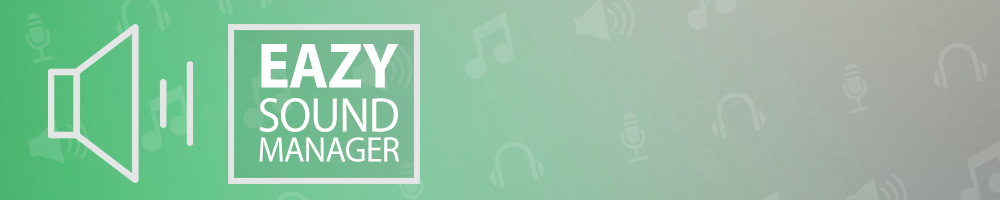
<style>
.page{position:relative;width:1000px;height:200px}
.page>*{position:absolute;margin:0}
.t1{font:64.5px "MyriadPro-Bold";letter-spacing:-0.02em;color:#ffffff;scale:0.94 1}
.t2{font:48.8px "MyriadPro-Regular";letter-spacing:-0.02em;color:#ffffff;scale:0.95 1}
.t3{font:35.6px "MyriadPro-Regular";letter-spacing:-0.02em;color:#ffffff;scale:0.95 1}
</style>
<div class="page">
<p class="t1" style="left:261px;top:44px;width:138px;height:44px">EAZY</p>
<p class="t2" style="left:259px;top:98px;width:139px;height:34px">SOUND</p>
<p class="t3" style="left:259px;top:137px;width:141px;height:25px">MANAGER</p>
</div>
